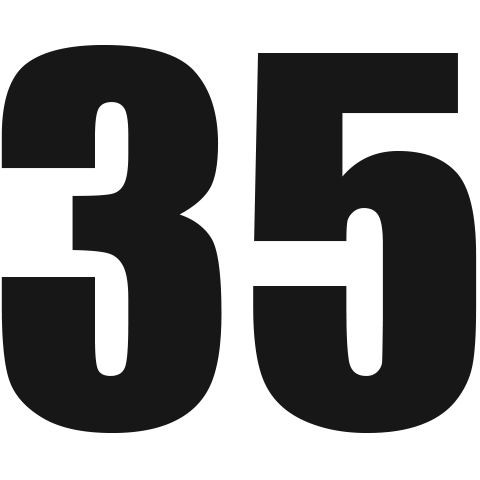
<style>
.page{position:relative;width:480px;height:480px;background:#171717}
.page>*{position:absolute;margin:0}
.t1{font:472.3px "Impact";color:#171717}
</style>
<div class="page">
<p class="t1" style="left:1px;top:45px;width:476px;height:388px">35</p>
</div>
